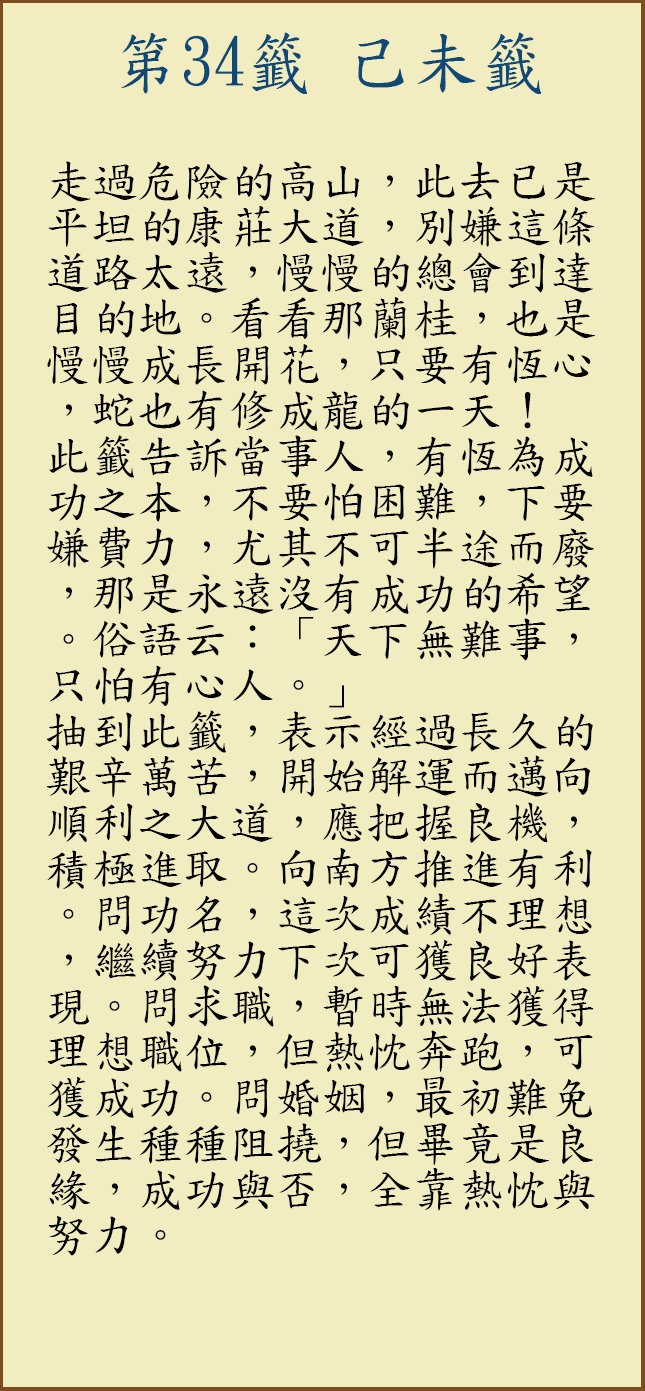
<style>
.page{position:relative;width:645px;height:1391px;background:#f2ecc1}
.page>*{position:absolute;margin:0}
.t1{font:66.7px "DFKaiShu-SB-Estd-BF";color:#0f4a77}
.t2{font:45.8px/45.8px "DFKaiShu-SB-Estd-BF";color:#000000}
</style>
<div class="page">
<p class="t1" style="left:121px;top:32px;width:421px;height:62px">第34籤 己未籤</p>
<p class="t2" style="left:46px;top:161px;width:549px;height:1095px">走過危險的高山，此去已是平坦的康莊大道，別嫌這條道路太遠，慢慢的總會到達目的地。看看那蘭桂，也是慢慢成長開花，只要有恆心，蛇也有修成龍的一天！<br>此籤告訴當事人，有恆為成功之本，不要怕困難，下要嫌費力，尤其不可半途而廢，那是永遠沒有成功的希望。俗語云：「天下無難事，只怕有心人。」<br>抽到此籤，表示經過長久的艱辛萬苦，開始解運而邁向順利之大道，應把握良機，積極進取。向南方推進有利。問功名，這次成績不理想，繼續努力下次可獲良好表現。問求職，暫時無法獲得理想職位，但熱忱奔跑，可獲成功。問婚姻，最初難免發生種種阻撓，但畢竟是良緣，成功與否，全靠熱忱與努力。</p>
</div>
